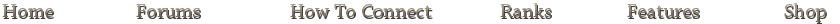
<style>
.page{position:relative;width:840px;height:24px;background:#ffffff}
.page>*{position:absolute;margin:0}
.t1{font:20px "ChaparralPro-Regular";color:#8e8372;scale:1.04 1}
</style>
<div class="page">
<p class="t1" style="left:2px;top:4px;width:51px;height:13px">Home</p>
<p class="t1" style="left:136px;top:4px;width:64px;height:13px">Forums</p>
<p class="t1" style="left:290px;top:4px;width:142px;height:13px">How To Connect</p>
<p class="t1" style="left:500px;top:3px;width:51px;height:14px">Ranks</p>
<p class="t1" style="left:627px;top:4px;width:72px;height:13px">Features</p>
<p class="t1" style="left:784px;top:3px;width:42px;height:19px">Shop</p>
</div>
